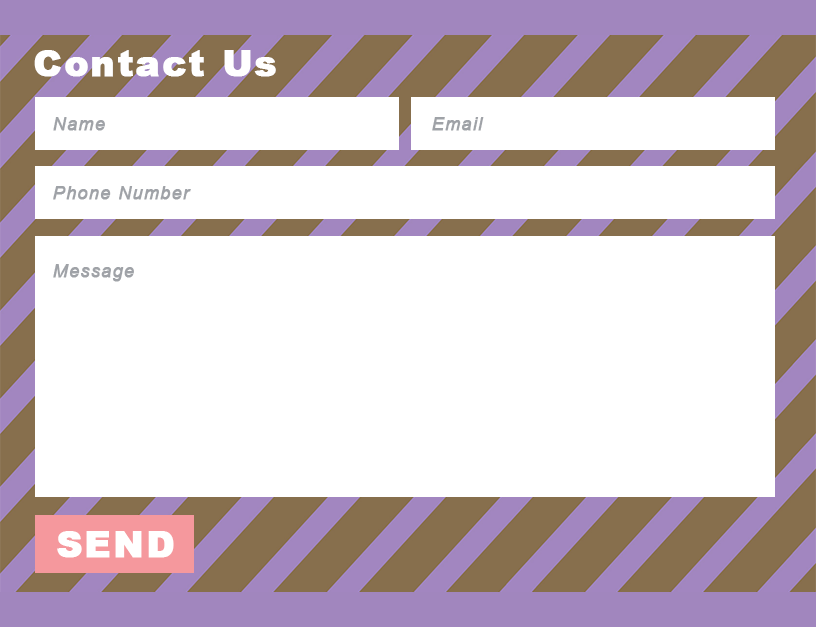
<style>
.page{position:relative;width:816px;height:627px;background:#ffffff}
.page>*{position:absolute;margin:0}
.t1{font:36px "Arial-Black";letter-spacing:0.05em;color:#ffffff;font-weight:bold}
.t2{font:18px "Arial-ItalicMT";letter-spacing:0.05em;color:#9fa2a7;font-weight:bold}
.t3{font:36px "Arial-Black";letter-spacing:0.05em;color:#fefefe;font-weight:bold}
</style>
<div class="page">
<p class="t1" style="left:34px;top:50px;width:242px;height:27px">Contact Us</p>
<p class="t2" style="left:53px;top:117px;width:52px;height:14px">Name</p>
<p class="t2" style="left:432px;top:117px;width:52px;height:14px">Email</p>
<p class="t2" style="left:53px;top:186px;width:138px;height:14px">Phone Number</p>
<p class="t2" style="left:53px;top:264px;width:81px;height:18px">Message</p>
<p class="t3" style="left:57px;top:531px;width:117px;height:27px">SEND</p>
</div>
